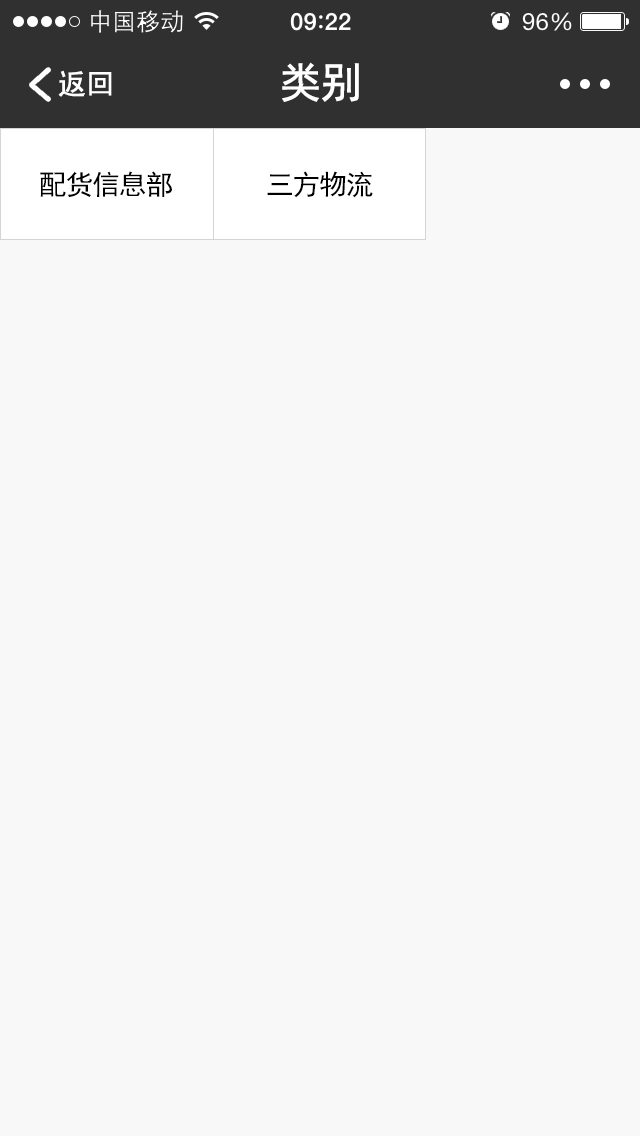
<style>
.page{position:relative;width:640px;height:1136px;background:#f8f8f8}
.page>*{position:absolute;margin:0}
.t1{font:42px "SimHei";letter-spacing:-0.04em;color:#ffffff;font-weight:bold}
.t2{font:28px "SimHei";color:#ffffff;font-weight:bold}
.t3{font:27.7px "SimHei";letter-spacing:-0.04em;color:#000000}
</style>
<div class="page">
<p class="t1" style="left:282px;top:62px;width:77px;height:40px">类别</p>
<p class="t2" style="left:58px;top:70px;width:54px;height:27px">返回</p>
<p class="t3" style="left:40px;top:171px;width:132px;height:27px">配货信息部</p>
<p class="t3" style="left:267px;top:171px;width:106px;height:27px">三方物流</p>
</div>
